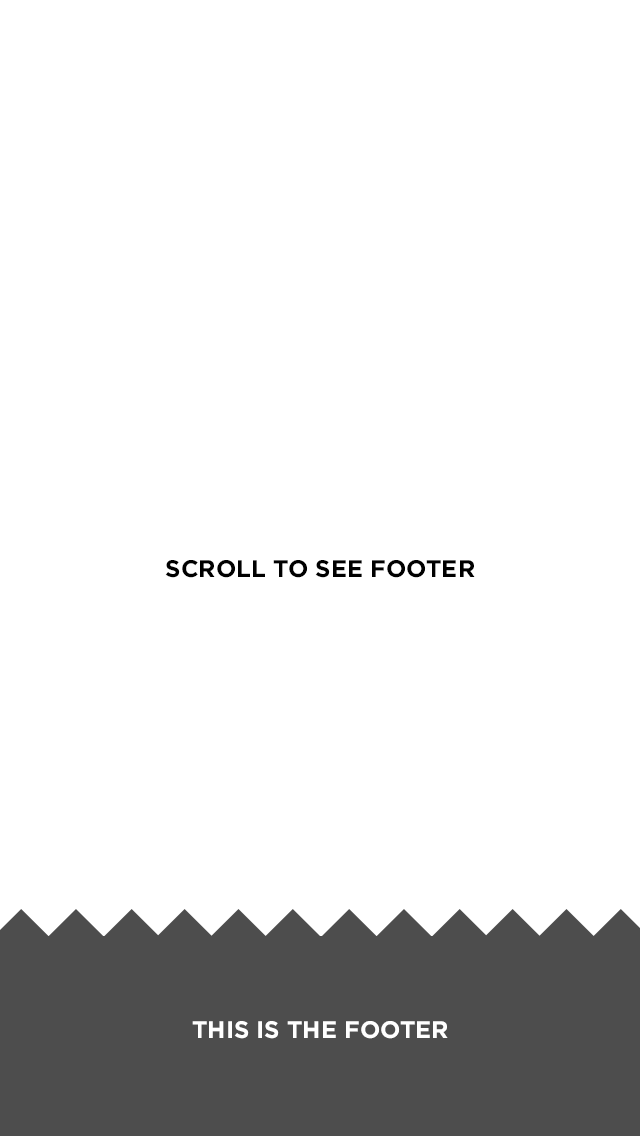
<style>
.page{position:relative;width:640px;height:1136px;background:#ffffff}
.page>*{position:absolute;margin:0}
.t1{font:24px "Gotham-Bold";color:#000000;text-transform:uppercase}
.t2{font:24px "Gotham-Bold";color:#ffffff;text-transform:uppercase}
</style>
<div class="page">
<p class="t1" style="left:165px;top:560px;width:310px;height:18px">SCROLL TO SEE FOOTER</p>
<p class="t2" style="left:192px;top:1021px;width:256px;height:18px">this is the footer</p>
</div>
